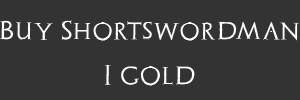
<style>
.page{position:relative;width:300px;height:100px;background:#333333}
.page>*{position:absolute;margin:0}
.t1{font:20.2px "Archeologicaps";color:#ffffff}
.t2{font:20.8px "Archeologicaps";color:#ffffff}
</style>
<div class="page">
<p class="t1" style="left:0px;top:20px;width:299px;height:21px">Buy Shortswordman</p>
<p class="t2" style="left:104px;top:64px;width:91px;height:22px">I gold</p>
</div>
